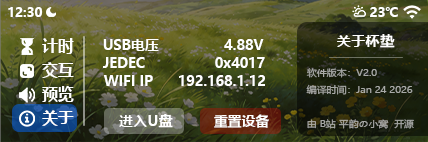
<style>
.page{position:relative;width:428px;height:142px}
.page>*{position:absolute;margin:0}
.t1{font:12.8px "MicrosoftYaHei-Bold";color:#ffffff}
.t2{font:13px "MicrosoftYaHei-Bold";color:#ffffff}
.t3{font:15.6px "MicrosoftYaHei-Bold";color:#ffffff}
.t4{font:13.8px "MicrosoftYaHei-Bold";color:#ffffff}
.t5{font:14.4px "MicrosoftYaHei-Bold";color:#ffffff}
.t6{font:9px "MicrosoftYaHei";color:#a8a8a5;scale:1.1 1}
.t7{font:9px "MicrosoftYaHei";color:#a8a9a6;scale:1.1 1}
.t8{font:14.2px "MicrosoftYaHei-Bold";color:#ffffff}
.t9{font:9px "MicrosoftYaHei";color:#a6a7a5;scale:1.1 1}
</style>
<div class="page">
<p class="t1" style="left:8px;top:7px;width:35px;height:10px">12:30</p>
<p class="t2" style="left:370px;top:7px;width:28px;height:10px">23℃</p>
<p class="t3" style="left:42px;top:38px;width:32px;height:16px">计时</p>
<p class="t4" style="left:103px;top:39px;width:161px;height:12px">USB电压                4.88V</p>
<p class="t5" style="left:337px;top:34px;width:58px;height:14px">关于杯垫</p>
<p class="t3" style="left:42px;top:62px;width:32px;height:16px">交互</p>
<p class="t4" style="left:103px;top:57px;width:162px;height:11px">JEDEC                 0x4017</p>
<p class="t4" style="left:103px;top:75px;width:162px;height:11px">WIFI IP      192.168.1.12</p>
<p class="t6" style="left:306px;top:68px;width:71px;height:10px">软件版本：V2.0</p>
<p class="t3" style="left:42px;top:86px;width:32px;height:16px">预览</p>
<p class="t7" style="left:306px;top:84px;width:107px;height:11px">编译时间：Jan 24 2026</p>
<p class="t3" style="left:42px;top:110px;width:32px;height:16px">关于</p>
<p class="t8" style="left:119px;top:114px;width:54px;height:14px">进入U盘</p>
<p class="t4" style="left:214px;top:114px;width:55px;height:14px">重置设备</p>
<p class="t9" style="left:307px;top:119px;width:107px;height:10px">由 B站 平韵の小窝  开源</p>
</div>
